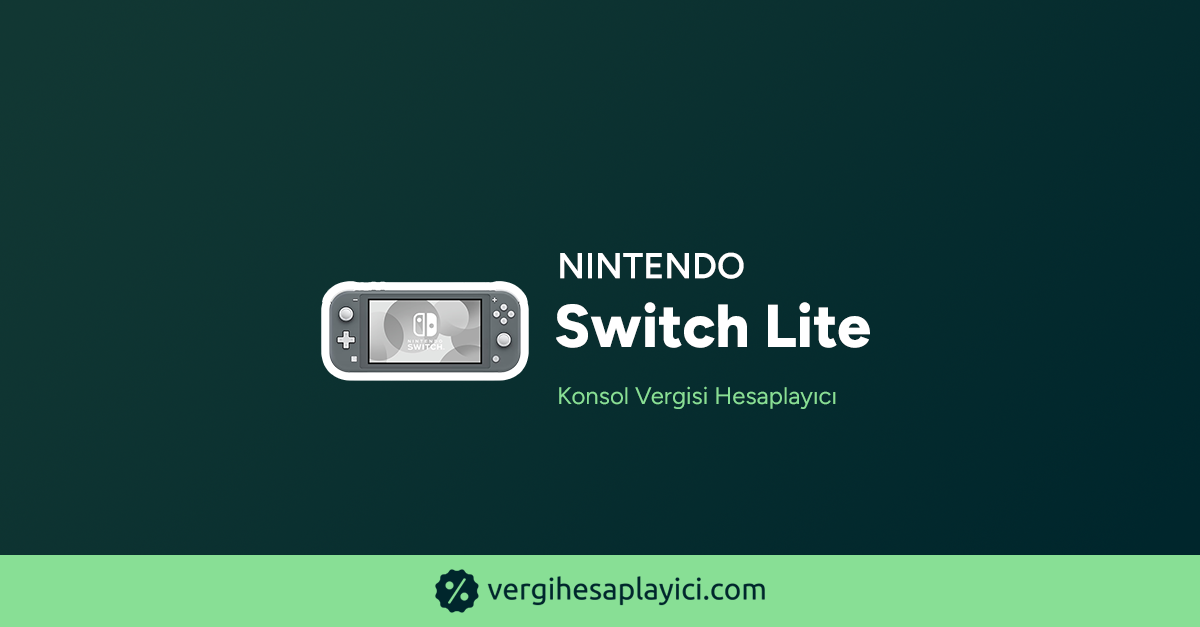
<style>
.page{position:relative;width:1200px;height:627px}
.page>*{position:absolute;margin:0}
.t1{font:36px "Figtree-SemiBold";color:#ffffff;text-transform:uppercase;font-weight:bold}
.t2{font:60.3px "Figtree-ExtraBold";color:#ffffff;font-weight:bold}
.t3{font:24px "Figtree-Regular";color:#88df95;font-weight:bold}
</style>
<div class="page">
<p class="t1" style="left:560px;top:252px;width:184px;height:27px">Nintendo</p>
<p class="t2" style="left:556px;top:302px;width:314px;height:46px">Switch Lite</p>
<p class="t3" style="left:559px;top:386px;width:277px;height:23px">Konsol Vergisi Hesaplayıcı</p>
</div>
